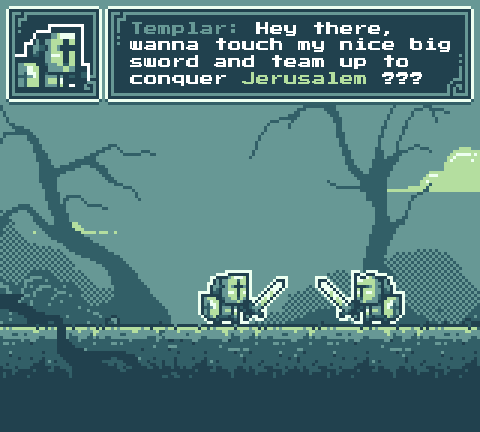
<style>
.page{position:relative;width:480px;height:432px;background:#679895}
.page>*{position:absolute;margin:0}
.t1{font:14px "PressStart2P";color:#ffffff}
.t2{font:14px "PressStart2P";color:#679895}
.t3{font:14px "PressStart2P";color:#b4de9f}
</style>
<div class="page">
<p class="t1" style="left:130px;top:22px;width:320px;height:64px"><span class="t2">Templar:</span> Hey there,<br>wanna touch my nice big<br>sword and team up to<br>conquer <span class="t3">Jerusalem</span> ???</p>
</div>
